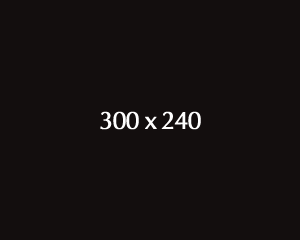
<style>
.page{position:relative;width:300px;height:240px;background:#130e0e}
.page>*{position:absolute;margin:0}
.t1{font:25px "Optima-Regular";letter-spacing:-0.075em;color:#ffffff;font-weight:bold}
</style>
<div class="page">
<p class="t1" style="left:100px;top:111px;width:101px;height:19px">300 x 240</p>
</div>
